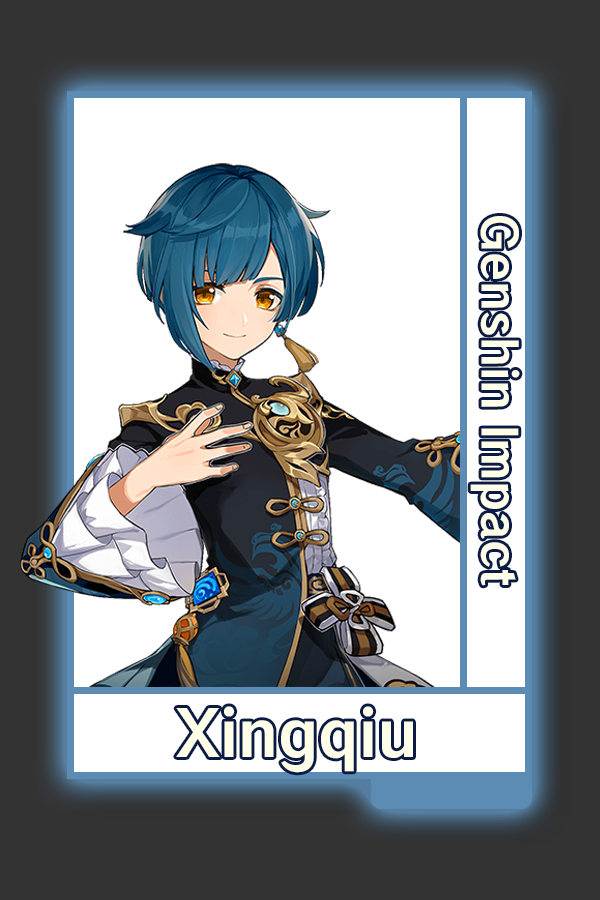
<style>
.page{position:relative;width:600px;height:900px;background:#ffffff}
.page>*{position:absolute;margin:0}
.t1{font:48.8px "HYWenHei-HEW";color:#fefef4}
.t2{font:65.2px "HYWenHei-HEW";color:#fefef4}
</style>
<div class="page">
<p class="t1" style="left:470px;top:216px;width:50px;height:370px;rotate:90deg">Genshin Impact</p>
<p class="t2" style="left:176px;top:706px;width:237px;height:67px">Xingqiu</p>
</div>
